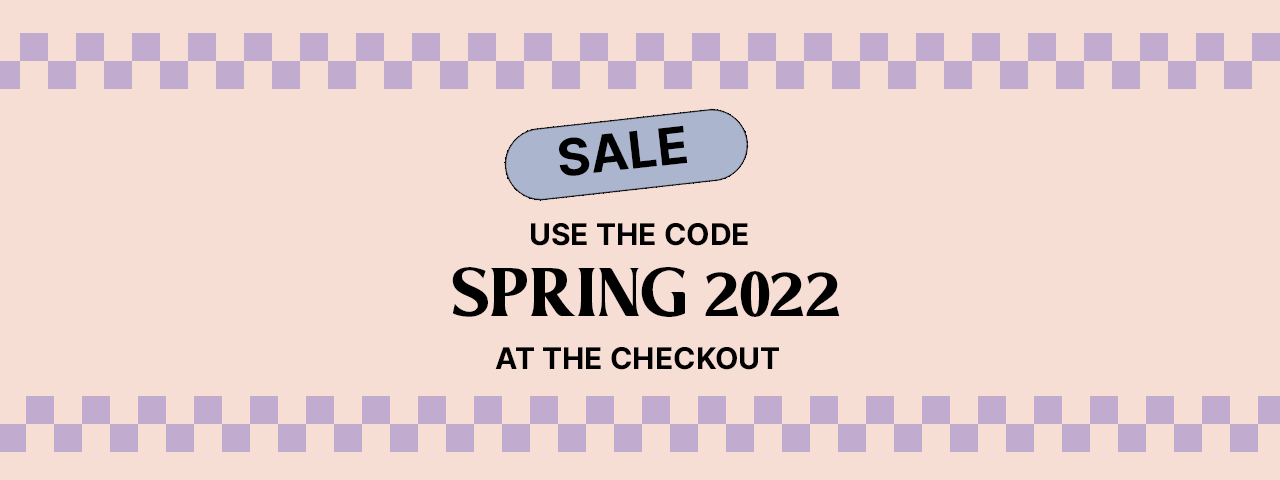
<style>
.page{position:relative;width:1280px;height:480px;background:#f7ded5}
.page>*{position:absolute;margin:0}
.t1{font:51.3px "Inter-Bold";color:#000000}
.t2{font:30px "Inter-Bold";color:#000000}
.t3{font:68.6px "Marshland_Beauty";color:#000000}
</style>
<div class="page">
<p class="t1" style="left:559px;top:125px;width:129px;height:51px;rotate:-6deg">SALE</p>
<p class="t2" style="left:531px;top:223px;width:217px;height:23px">USE THE CODE</p>
<p class="t3" style="left:452px;top:267px;width:388px;height:50px">SPRING 2022</p>
<p class="t2" style="left:495px;top:347px;width:284px;height:23px">AT THE CHECKOUT</p>
</div>
